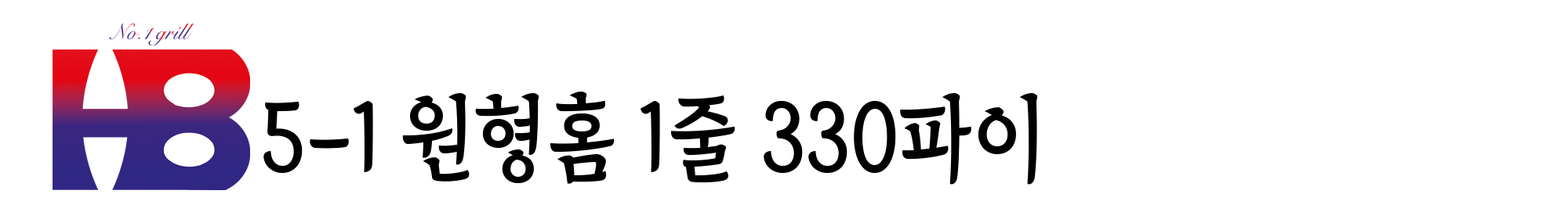
<style>
.page{position:relative;width:1568px;height:205px;background:#ffffff}
.page>*{position:absolute;margin:0}
.t1{font:93.7px "TheIndependenceHallofKorea-Regular";color:#000000;scale:0.89 1}
</style>
<div class="page">
<p class="t1" style="left:263px;top:92px;width:775px;height:93px">5-1 원형홈 1줄 330파이</p>
</div>
